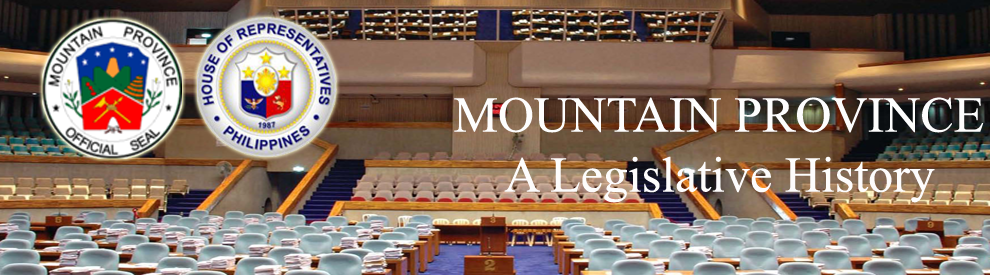
<style>
.page{position:relative;width:990px;height:275px}
.page>*{position:absolute;margin:0}
.t1{font:50px "TimesNewRomanPSMT";color:#fdfcfc}
.t2{font:50px "TimesNewRomanPSMT";color:#fdfdfd}
</style>
<div class="page">
<p class="t1" style="left:454px;top:97px;width:530px;height:106px;text-align:center"><span class="t2">MOUNTAIN PROVINCE<br></span>A Legislative History</p>
</div>
